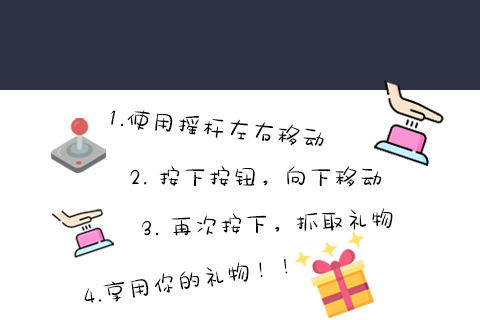
<style>
.page{position:relative;width:480px;height:320px;background:#ffffff}
.page>*{position:absolute;margin:0}
.t1{font:22.9px "AaDajuweizhong";letter-spacing:0.1em;color:#000000}
</style>
<div class="page">
<p class="t1" style="left:111px;top:109px;width:213px;height:37px;rotate:6deg">1.使用摇杆左右移动</p>
<p class="t1" style="left:130px;top:165px;width:252px;height:22px">2. 按下按钮，向下移动</p>
<p class="t1" style="left:142px;top:208px;width:251px;height:28px;rotate:-2deg">3. 再次按下，抓取礼物</p>
<p class="t1" style="left:84px;top:258px;width:204px;height:45px;rotate:-9deg">4.享用你的礼物！！</p>
</div>
